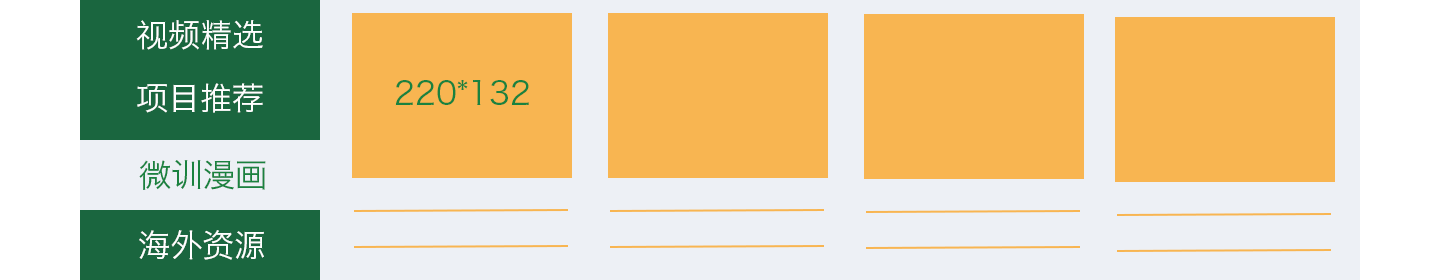
<style>
.page{position:relative;width:1440px;height:280px;background:#edf0f5}
.page>*{position:absolute;margin:0}
.t1{font:32px "HiraginoSansGB-W3";color:#ffffff}
.t2{font:32px "HiraginoSansGB-W3";color:#1a823f}
</style>
<div class="page">
<p class="t1" style="left:136px;top:20px;width:127px;height:30px">视频精选</p>
<p class="t1" style="left:137px;top:83px;width:126px;height:30px">项目推荐</p>
<p class="t2" style="left:395px;top:80px;width:134px;height:26px">220*132</p>
<p class="t2" style="left:139px;top:160px;width:127px;height:30px">微训漫画</p>
<p class="t1" style="left:139px;top:230px;width:125px;height:30px">海外资源</p>
</div>
